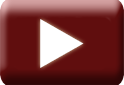
<style>
.page{position:relative;width:124px;height:85px;background:#600e0e}
.page>*{position:absolute;margin:0}
.t1{font:62.6px "Gulim";letter-spacing:-0.025em;color:#ffffff;scale:1.13 1}
</style>
<div class="page">
<p class="t1" style="left:40px;top:19px;width:44px;height:49px">▶</p>
</div>
